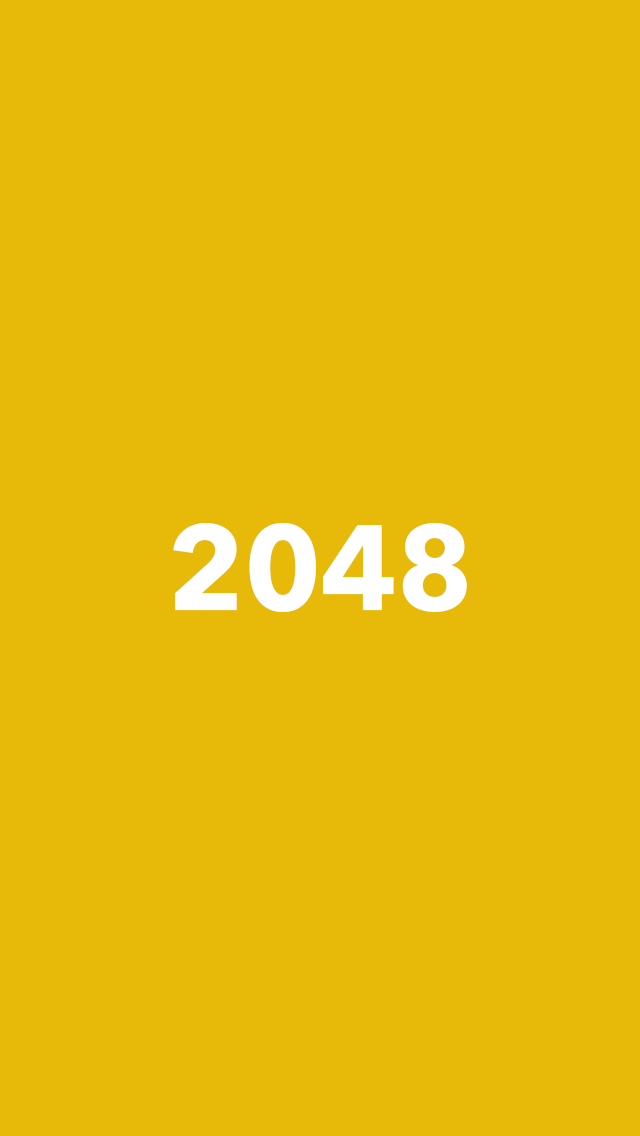
<style>
.page{position:relative;width:640px;height:1136px;background:#e7ba09}
.page>*{position:absolute;margin:0}
.t1{font:120px "AvenirNext-Bold";letter-spacing:-0.01em;color:#ffffff;text-transform:uppercase}
</style>
<div class="page">
<p class="t1" style="left:173px;top:523px;width:294px;height:89px">2048</p>
</div>
